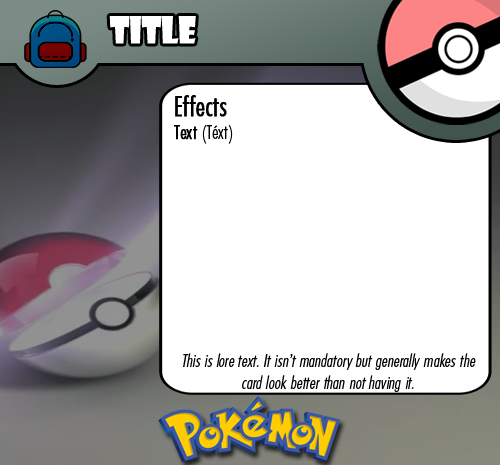
<style>
.page{position:relative;width:500px;height:465px;background:#ffffff}
.page>*{position:absolute;margin:0}
.t1{font:36.7px "ShowcardGothic-Reg";letter-spacing:-0.025em;color:#ffffff;scale:0.91 1}
.t2{font:27.8px "FuturaCondensedBQ-Light";color:#010101;font-weight:bold}
.t3{font:19.4px "FuturaCondensedBQ-Light";color:#010101;font-weight:bold}
.t4{font:19.4px "FuturaCondensedBQ-Light";color:#010101}
.t5{font:18.1px "FuturaCondensedBQ-Light";color:#010101;font-style:italic}
</style>
<div class="page">
<p class="t1" style="left:109px;top:16px;width:87px;height:28px">Title</p>
<p class="t2" style="left:174px;top:95px;width:59px;height:49px">Effects<br><span class="t3">Text</span><span class="t4"> (Téxt)</span></p>
<p class="t5" style="left:183px;top:353px;width:293px;height:39px;text-align:center">This is lore text. It isn’t mandatory but generally makes the card look better than not having it.</p>
</div>
